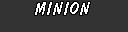
<style>
.page{position:relative;width:128px;height:32px;background:#333333}
.page>*{position:absolute;margin:0}
.t1{font:18px "DomDiagonalBT-Regular";letter-spacing:0.075em;color:#ffffff}
</style>
<div class="page">
<p class="t1" style="left:35px;top:2px;width:55px;height:13px">MINION</p>
</div>
